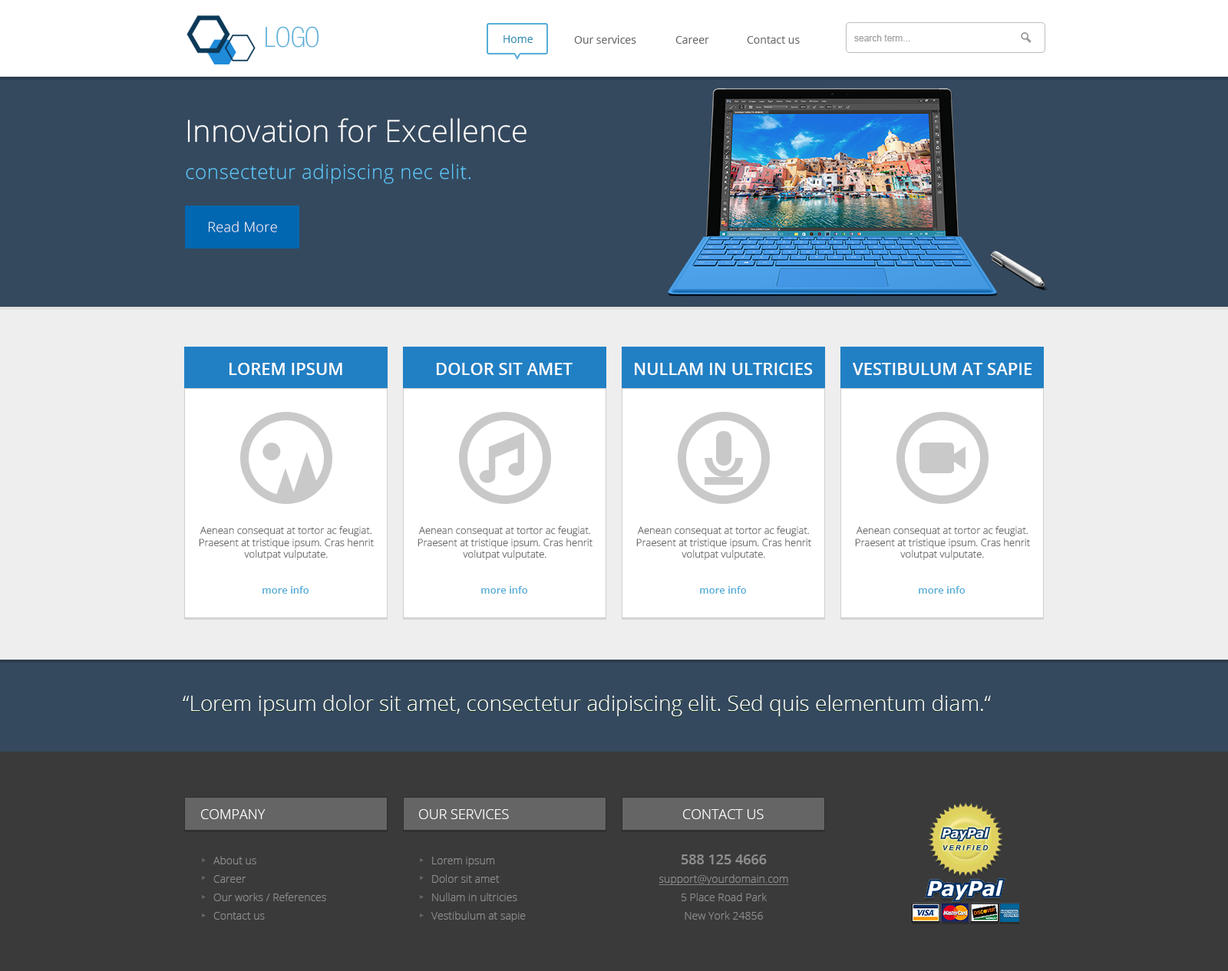
<style>
.page{position:relative;width:1228px;height:971px;background:#34495e}
.page>*{position:absolute;margin:0}
.t1{font:27.6px "Helvetica37-CondensedThin";color:#54add7}
.t2{font:10.7px "OpenSans";color:#308eb4}
.t3{font:10.7px "OpenSans";color:#6a6867}
.t4{font:9.2px "ArialMT";color:#a0a0a0}
.t5{font:30.7px "OpenSans-Light";color:#ffffff}
.t6{font:19.9px "OpenSans-Light";letter-spacing:0.02em;color:#5ecbff}
.t7{font:13.8px "OpenSans-Light";letter-spacing:0.02em;color:#ffffff}
.t8{font:16.9px "OpenSans-Semibold";color:#ffffff;text-transform:uppercase}
.t9{font:10px "OpenSans-Light";color:#6f6f6f}
.t10{font:10px "OpenSans-Semibold";color:#54add7}
.t11{font:21.5px "OpenSans-Light";color:#ffffff}
.t12{font:13.8px "OpenSans-Light";color:#ffffff}
.t13{font:10.7px/18.4px "OpenSans-Light";color:#8e8e8e}
.t14{font:13.8px/18.4px "OpenSans-Semibold";color:#8e8e8e}
.t15{font:10.7px/18.4px "OpenSans-Light";color:#8e8e8e;text-decoration:underline}
</style>
<div class="page">
<p class="t1" style="left:265px;top:26px;width:54px;height:22px">LOGO</p>
<p class="t2" style="left:503px;top:35px;width:29px;height:8px">Home</p>
<p class="t3" style="left:574px;top:35px;width:62px;height:9px">Our services</p>
<p class="t3" style="left:675px;top:36px;width:34px;height:8px">Career</p>
<p class="t3" style="left:747px;top:36px;width:52px;height:8px">Contact us</p>
<p class="t4" style="left:854px;top:35px;width:56px;height:6px">search term...</p>
<p class="t5" style="left:187px;top:118px;width:339px;height:25px">Innovation for Excellence</p>
<p class="t6" style="left:186px;top:163px;width:284px;height:21px">consectetur adipiscing nec elit.</p>
<p class="t7" style="left:209px;top:221px;width:68px;height:11px">Read More</p>
<p class="t8" style="left:229px;top:363px;width:113px;height:12px">Lorem ipsum</p>
<p class="t8" style="left:437px;top:363px;width:135px;height:12px">Dolor sit amet</p>
<p class="t8" style="left:635px;top:363px;width:178px;height:12px">Nullam in ultricies</p>
<p class="t8" style="left:852px;top:363px;width:179px;height:12px">Vestibulum at sapie</p>
<p class="t9" style="left:199px;top:526px;width:175px;height:35px;text-align:center">Aenean consequat at tortor ac feugiat. Praesent at tristique ipsum. Cras henrit volutpat vulputate.</p>
<p class="t9" style="left:417px;top:526px;width:175px;height:35px;text-align:center">Aenean consequat at tortor ac feugiat. Praesent at tristique ipsum. Cras henrit volutpat vulputate.</p>
<p class="t9" style="left:636px;top:526px;width:175px;height:35px;text-align:center">Aenean consequat at tortor ac feugiat. Praesent at tristique ipsum. Cras henrit volutpat vulputate.</p>
<p class="t9" style="left:855px;top:526px;width:175px;height:35px;text-align:center">Aenean consequat at tortor ac feugiat. Praesent at tristique ipsum. Cras henrit volutpat vulputate.</p>
<p class="t10" style="left:262px;top:586px;width:47px;height:8px">more info</p>
<p class="t10" style="left:481px;top:586px;width:47px;height:8px">more info</p>
<p class="t10" style="left:700px;top:586px;width:47px;height:8px">more info</p>
<p class="t10" style="left:918px;top:586px;width:47px;height:8px">more info</p>
<p class="t11" style="left:183px;top:695px;width:808px;height:22px">“Lorem ipsum dolor sit amet, consectetur adipiscing elit. Sed quis elementum diam.“</p>
<p class="t12" style="left:201px;top:809px;width:64px;height:10px">COMPANY</p>
<p class="t12" style="left:419px;top:809px;width:90px;height:10px">OUR SERVICES</p>
<p class="t12" style="left:683px;top:809px;width:80px;height:10px">CONTACT US</p>
<p class="t13" style="left:213px;top:856px;width:113px;height:64px">About us<br>Career<br>Our works / References<br>Contact us</p>
<p class="t13" style="left:431px;top:857px;width:95px;height:65px">Lorem ipsum<br>Dolor sit amet<br>Nullam in ultricies<br>Vestibulum at sapie</p>
<p class="t13" style="left:658px;top:855px;width:131px;height:65px;text-align:center"><span class="t14">588 125 4666<br></span><span class="t15">support@yourdomain.com<br></span>5 Place Road Park<br>New York 24856</p>
</div>
